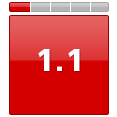
<style>
.page{position:relative;width:117px;height:117px;background:#d40000}
.page>*{position:absolute;margin:0}
.t1{font:36px "Colaborate-Bold";color:#ffffff;text-transform:uppercase}
</style>
<div class="page">
<p class="t1" style="left:38px;top:49px;width:42px;height:22px">1.1</p>
</div>
